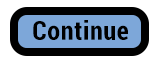
<style>
.page{position:relative;width:160px;height:62px;background:#ffffff}
.page>*{position:absolute;margin:0}
.t1{font:26px "Roboto-BoldCondensed";letter-spacing:0.025em;color:#000000}
</style>
<div class="page">
<p class="t1" style="left:33px;top:20px;width:95px;height:20px">Continue</p>
</div>
